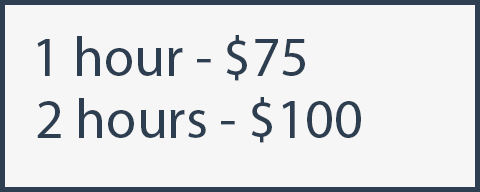
<style>
.page{position:relative;width:480px;height:192px;background:#f6f6f6}
.page>*{position:absolute;margin:0}
.t1{font:55.6px "MyriadPro-Regular";color:#2c3e50}
</style>
<div class="page">
<p class="t1" style="left:37px;top:35px;width:268px;height:46px">1 hour - $75</p>
<p class="t1" style="left:37px;top:97px;width:324px;height:46px">2 hours - $100</p>
</div>
